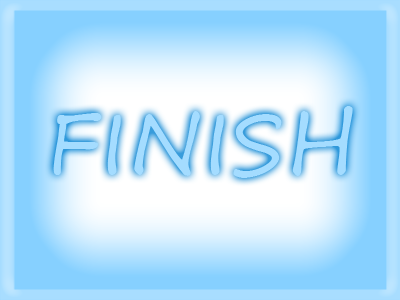
<style>
.page{position:relative;width:400px;height:300px;background:#86d0ff}
.page>*{position:absolute;margin:0}
.t1{font:85px "SegoeScript";letter-spacing:0.025em;color:#a4dcff}
</style>
<div class="page">
<p class="t1" style="left:53px;top:106px;width:300px;height:72px">FINISH</p>
</div>
